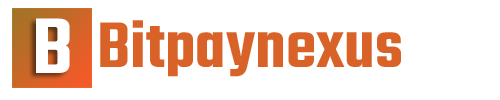
<style>
.page{position:relative;width:500px;height:100px;background:#ffffff}
.page>*{position:absolute;margin:0}
.t1{font:85.6px "Teko-SemiBold";color:#ffffff}
.t2{font:70px "Teko-SemiBold";color:#d96228}
</style>
<div class="page">
<p class="t1" style="left:36px;top:18px;width:34px;height:55px">B</p>
<p class="t2" style="left:100px;top:20px;width:301px;height:57px">Bitpaynexus</p>
</div>
